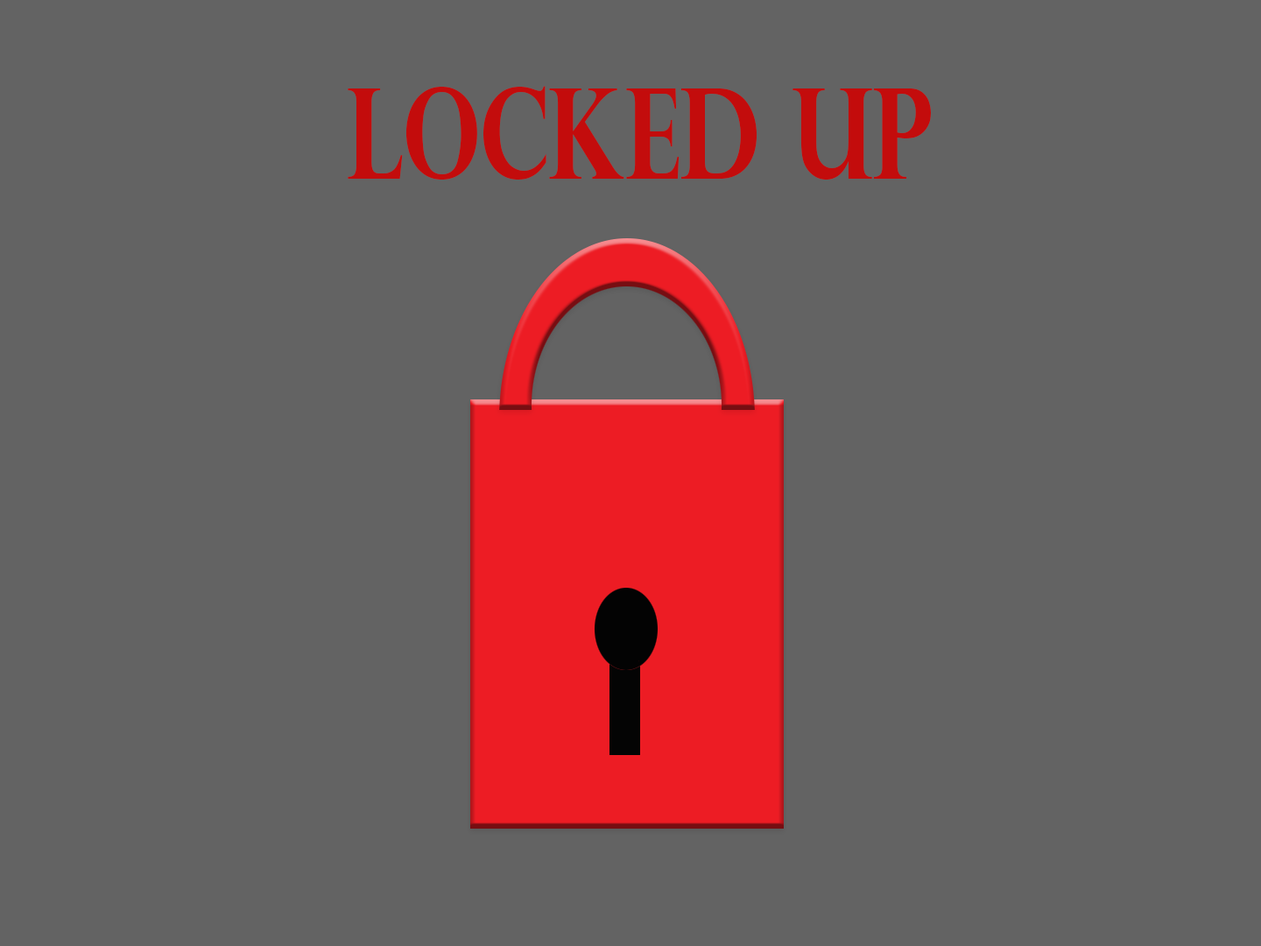
<style>
.page{position:relative;width:1261px;height:946px;background:#636363}
.page>*{position:absolute;margin:0}
.t1{font:126.1px "PerpetuaTitlingMT-Bold";color:#c30c0c;scale:0.75 1}
</style>
<div class="page">
<p class="t1" style="left:348px;top:86px;width:583px;height:94px">Locked UP</p>
</div>
